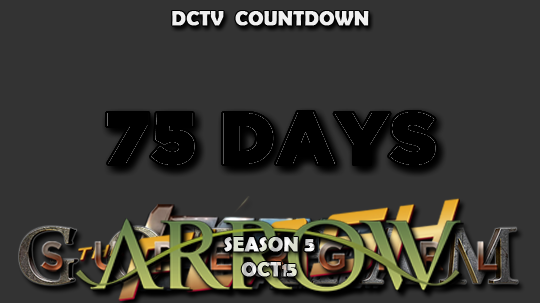
<style>
.page{position:relative;width:540px;height:303px;background:#333333}
.page>*{position:absolute;margin:0}
.t1{font:20px "BerlinSansFBDemi-Bold";color:#ffffff;font-weight:bold}
.t2{font:72px "GothamBlack";color:#000000;font-weight:bold}
.t3{font:20px "BerlinSansFBDemi-Bold";font-weight:bold}
</style>
<div class="page">
<p class="t1" style="left:172px;top:11px;width:197px;height:15px">DCTV  COUNTDOWN</p>
<p class="t1" style="left:172px;top:11px;width:197px;height:15px">DCTV  COUNTDOWN</p>
<p class="t2" style="left:107px;top:112px;width:329px;height:53px">75 DAYS</p>
<p class="t2" style="left:107px;top:112px;width:329px;height:53px">75 DAYS</p>
<p class="t2" style="left:107px;top:112px;width:329px;height:53px">75 DAYS</p>
<p class="t2" style="left:107px;top:112px;width:329px;height:53px">75 DAYS</p>
<p class="t3" style="left:224px;top:237px;width:91px;height:15px">SEASON 2</p>
<p class="t3" style="left:224px;top:237px;width:91px;height:15px">SEASON 3</p>
<p class="t3" style="left:224px;top:237px;width:91px;height:15px">SEASON 3</p>
<p class="t3" style="left:224px;top:237px;width:91px;height:15px">SEASON 2</p>
<p class="t3" style="left:224px;top:237px;width:91px;height:15px">SEASON 5</p>
<p class="t3" style="left:241px;top:262px;width:57px;height:15px">OCT 4</p>
<p class="t3" style="left:241px;top:262px;width:56px;height:15px">OCT 5</p>
</div>
